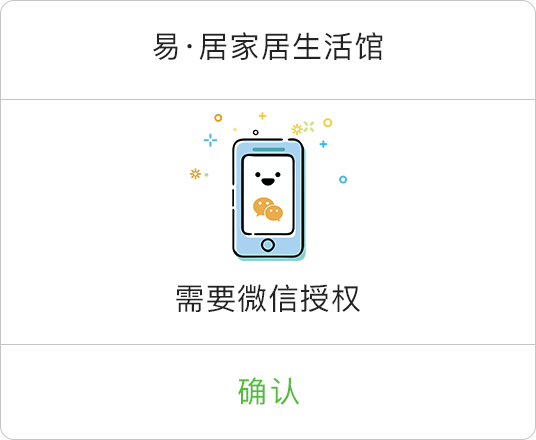
<style>
.page{position:relative;width:536px;height:440px;background:#ffffff}
.page>*{position:absolute;margin:0}
.t1{font:30px "PingFang-SC-Medium";letter-spacing:0.04em;color:#222222}
.t2{font:30px "PingFang-SC-Medium";letter-spacing:0.1em;color:#4fbd36}
</style>
<div class="page">
<p class="t1" style="left:153px;top:32px;width:230px;height:28px">易·居家居生活馆</p>
<p class="t1" style="left:176px;top:284px;width:184px;height:29px">需要微信授权</p>
<p class="t2" style="left:238px;top:377px;width:61px;height:28px">确认</p>
</div>
